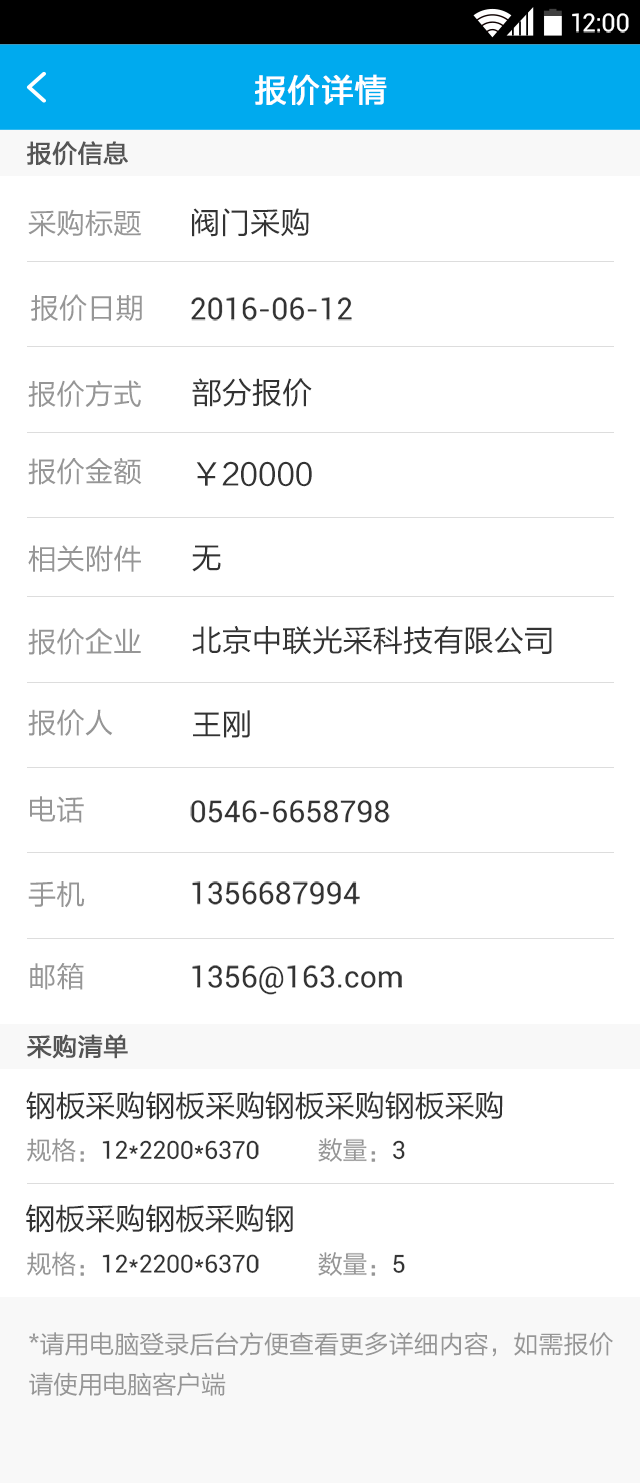
<style>
.page{position:relative;width:640px;height:1483px;background:#ffffff}
.page>*{position:absolute;margin:0}
.t1{font:24.9px "Roboto-Regular";color:#ffffff}
.t2{font:32px "FZLTHJW--GB1-0";letter-spacing:0.02em;color:#ffffff;font-weight:bold}
.t3{font:24.9px "FZLTHJW--GB1-0";color:#555555;font-weight:bold}
.t4{font:28.5px "FZLTHJW--GB1-0";color:#969696}
.t5{font:30.2px "FZLTHJW--GB1-0";color:#333333}
.t6{font:30.2px "Roboto-Regular";color:#333333}
.t7{font:30.2px "FZLTHJW--GB1-0";letter-spacing:-0.01em;color:#333333;text-transform:uppercase}
.t8{font:24.9px "Roboto-Regular";letter-spacing:-0.01em;color:#333333;text-transform:uppercase}
.t9{font:24.9px "FZLTHJW--GB1-0";letter-spacing:-0.01em;color:#969696;text-transform:uppercase}
.t10{font:24.9px/40.3px "FZLTHJW--GB1-0";letter-spacing:-0.01em;color:#969696;text-transform:uppercase}
</style>
<div class="page">
<p class="t1" style="left:572px;top:13px;width:57px;height:20px">12:00</p>
<p class="t2" style="left:255px;top:74px;width:132px;height:32px">报价详情</p>
<p class="t3" style="left:27px;top:141px;width:101px;height:25px">报价信息</p>
<p class="t4" style="left:28px;top:209px;width:114px;height:28px">采购标题</p>
<p class="t5" style="left:192px;top:208px;width:117px;height:29px">阀门采购</p>
<p class="t4" style="left:31px;top:294px;width:111px;height:27px">报价日期</p>
<p class="t6" style="left:191px;top:297px;width:161px;height:24px">2016-06-12</p>
<p class="t4" style="left:28px;top:380px;width:113px;height:27px">报价方式</p>
<p class="t5" style="left:192px;top:378px;width:120px;height:29px">部分报价</p>
<p class="t4" style="left:28px;top:458px;width:114px;height:27px">报价金额</p>
<p class="t5" style="left:196px;top:461px;width:116px;height:26px">￥20000</p>
<p class="t4" style="left:28px;top:545px;width:113px;height:27px">相关附件</p>
<p class="t5" style="left:192px;top:545px;width:29px;height:27px">无</p>
<p class="t4" style="left:28px;top:628px;width:113px;height:27px">报价企业</p>
<p class="t5" style="left:192px;top:626px;width:360px;height:29px">北京中联光采科技有限公司</p>
<p class="t4" style="left:28px;top:709px;width:85px;height:27px">报价人</p>
<p class="t5" style="left:193px;top:710px;width:57px;height:28px">王刚</p>
<p class="t4" style="left:30px;top:796px;width:54px;height:27px">电话</p>
<p class="t6" style="left:190px;top:800px;width:200px;height:23px">0546-6658798</p>
<p class="t4" style="left:28px;top:881px;width:57px;height:27px">手机</p>
<p class="t6" style="left:192px;top:881px;width:168px;height:24px">1356687994</p>
<p class="t4" style="left:30px;top:963px;width:54px;height:27px">邮箱</p>
<p class="t6" style="left:192px;top:965px;width:210px;height:30px">1356@163.com</p>
<p class="t3" style="left:27px;top:1034px;width:101px;height:25px">采购清单</p>
<p class="t7" style="left:26px;top:1091px;width:477px;height:29px">钢板采购钢板采购钢板采购钢板采购</p>
<p class="t8" style="left:27px;top:1138px;width:232px;height:24px"><span class="t9">规格：</span>12*2200*6370</p>
<p class="t9" style="left:318px;top:1138px;width:87px;height:24px">数量：<span class="t8">3</span></p>
<p class="t7" style="left:26px;top:1204px;width:267px;height:29px">钢板采购钢板采购钢</p>
<p class="t8" style="left:27px;top:1251px;width:232px;height:25px"><span class="t9">规格：</span>12*2200*6370</p>
<p class="t9" style="left:318px;top:1252px;width:87px;height:24px">数量：<span class="t8">5</span></p>
<p class="t10" style="left:29px;top:1332px;width:584px;height:64px;text-align:justify">*请用电脑登录后台方便查看更多详细内容，如需报价请使用电脑客户端</p>
</div>
